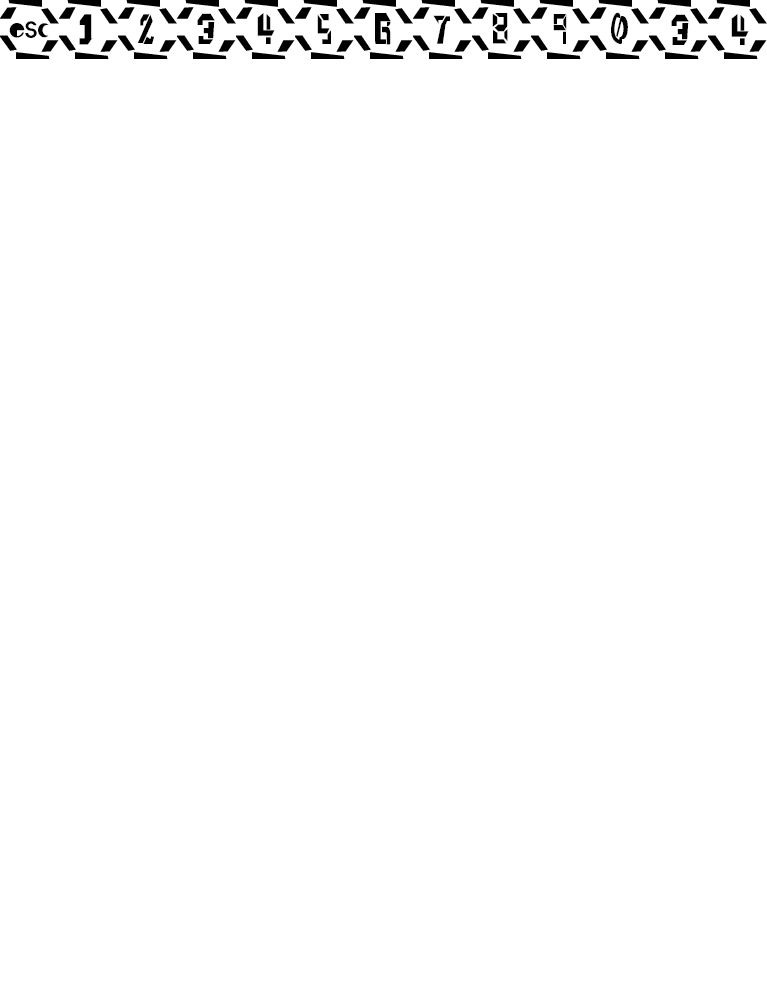
<style>
.page{position:relative;width:767px;height:1003px;background:#ffffff}
.page>*{position:absolute;margin:0}
.t1{font:37.5px "pigmo-00";color:#000000}
.t2{font:33.3px "pigmo-00";color:#000000}
</style>
<div class="page">
<p class="t1" style="left:79px;top:14px;width:14px;height:31px">1</p>
<p class="t1" style="left:137px;top:14px;width:17px;height:30px">2</p>
<p class="t1" style="left:197px;top:13px;width:18px;height:31px">3</p>
<p class="t1" style="left:257px;top:13px;width:18px;height:31px">4</p>
<p class="t1" style="left:317px;top:14px;width:15px;height:30px">5</p>
<p class="t1" style="left:375px;top:13px;width:16px;height:32px">6</p>
<p class="t1" style="left:433px;top:15px;width:17px;height:29px">7</p>
<p class="t1" style="left:492px;top:13px;width:16px;height:31px">8</p>
<p class="t1" style="left:553px;top:14px;width:14px;height:30px">9</p>
<p class="t1" style="left:611px;top:12px;width:17px;height:32px">0</p>
<p class="t1" style="left:671px;top:14px;width:18px;height:31px">3</p>
<p class="t1" style="left:731px;top:14px;width:18px;height:31px">4</p>
<p class="t2" style="left:9px;top:21px;width:40px;height:17px">esc</p>
</div>
